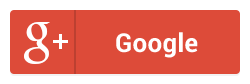
<style>
.page{position:relative;width:250px;height:84px;background:#dd4b39}
.page>*{position:absolute;margin:0}
.t1{font:26px "Roboto-Bold";letter-spacing:0.01em;color:#ffffff}
.t2{font:26px "Roboto-Bold";letter-spacing:0.05em;color:#ffffff}
</style>
<div class="page">
<p class="t1" style="left:116px;top:32px;width:82px;height:26px">Googl<span class="t2">e</span></p>
</div>
